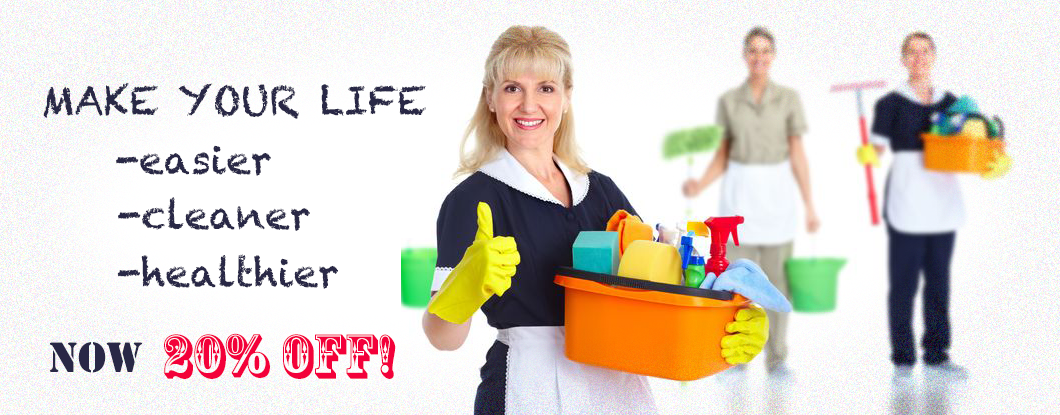
<style>
.page{position:relative;width:1060px;height:415px}
.page>*{position:absolute;margin:0}
.t1{font:39.4px "Chalkduster";color:#292846}
.t2{font:39.4px "StencilStd";color:#292846}
.t3{font:59.2px "RosewoodStd-Regular";color:#f3013a}
</style>
<div class="page">
<p class="t1" style="left:43px;top:83px;width:383px;height:36px">MAKE YOUR LIFE</p>
<p class="t1" style="left:116px;top:145px;width:155px;height:31px">-easier</p>
<p class="t1" style="left:118px;top:197px;width:192px;height:34px">-cleaner</p>
<p class="t1" style="left:117px;top:254px;width:221px;height:35px">-healthier</p>
<p class="t2" style="left:49px;top:342px;width:93px;height:31px">NOW</p>
<p class="t3" style="left:164px;top:333px;width:232px;height:46px">20% off!</p>
</div>
